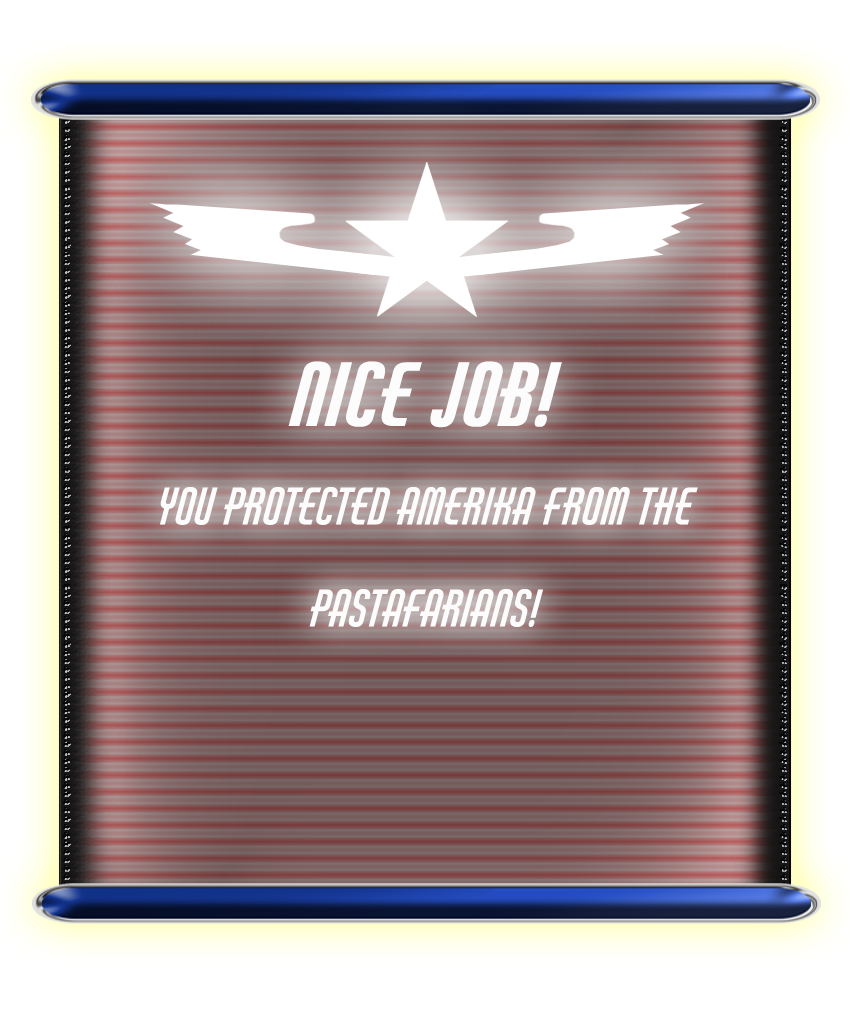
<style>
.page{position:relative;width:850px;height:1020px}
.page>*{position:absolute;margin:0}
.t1{font:85px "AirAmerica-Regular";color:#fcfcfc;font-weight:bold}
.t2{font:85px "AirAmerica-Regular";color:#fcfcfc}
</style>
<div class="page">
<p class="t1" style="left:288px;top:361px;width:274px;height:67px">NICE JOB!</p>
<p class="t2" style="left:160px;top:487px;width:538px;height:140px">You protected amErika FROM THE pastafarians!</p>
</div>
